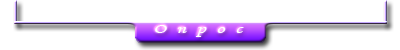
<style>
.page{position:relative;width:400px;height:50px;background:#ffffff}
.page>*{position:absolute;margin:0}
.t1{font:14px "MonotypeCorsiva";letter-spacing:0.5em;color:#ac32ff;scale:1.5 1}
</style>
<div class="page">
<p class="t1" style="left:155px;top:25px;width:89px;height:12px">Опрос</p>
</div>
